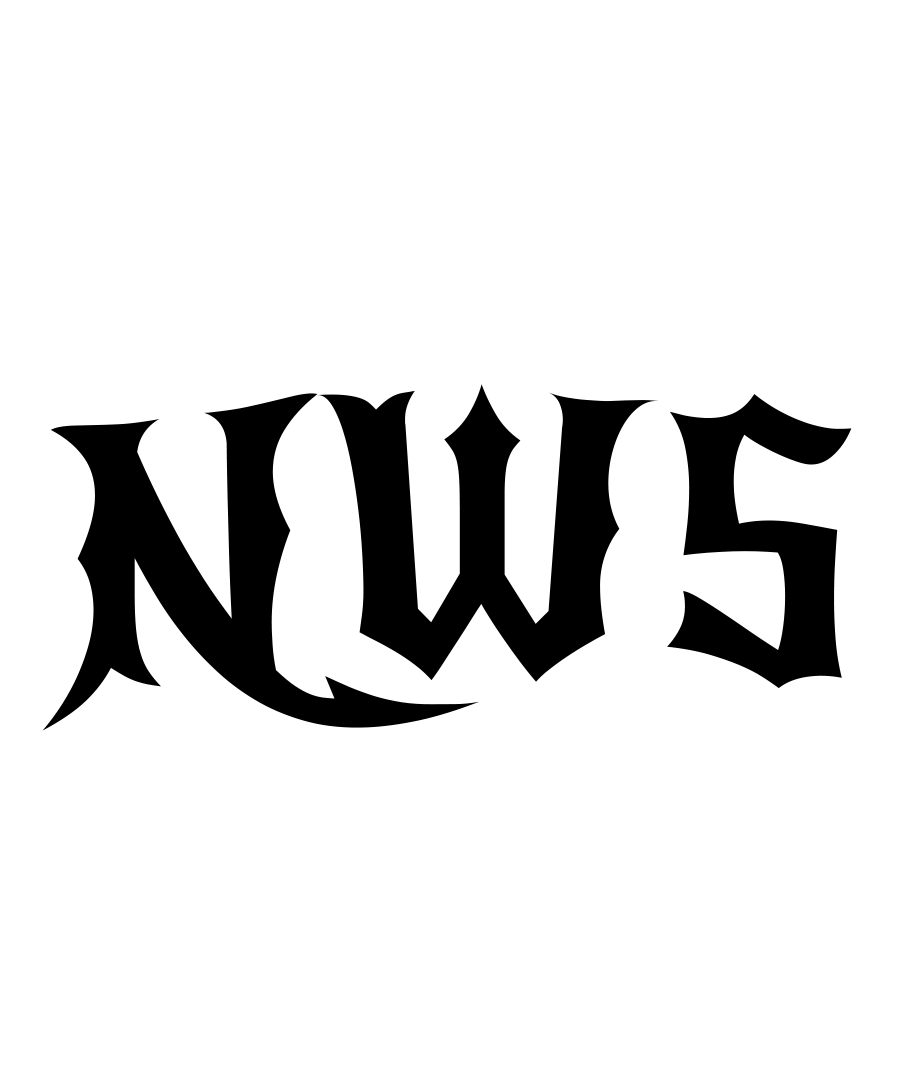
<style>
.page{position:relative;width:906px;height:1080px;background:#ffffff}
.page>*{position:absolute;margin:0}
.t1{font:356.1px "NewRocker-Regular";color:#000000}
</style>
<div class="page">
<p class="t1" style="left:42px;top:384px;width:810px;height:347px">NWS</p>
</div>
